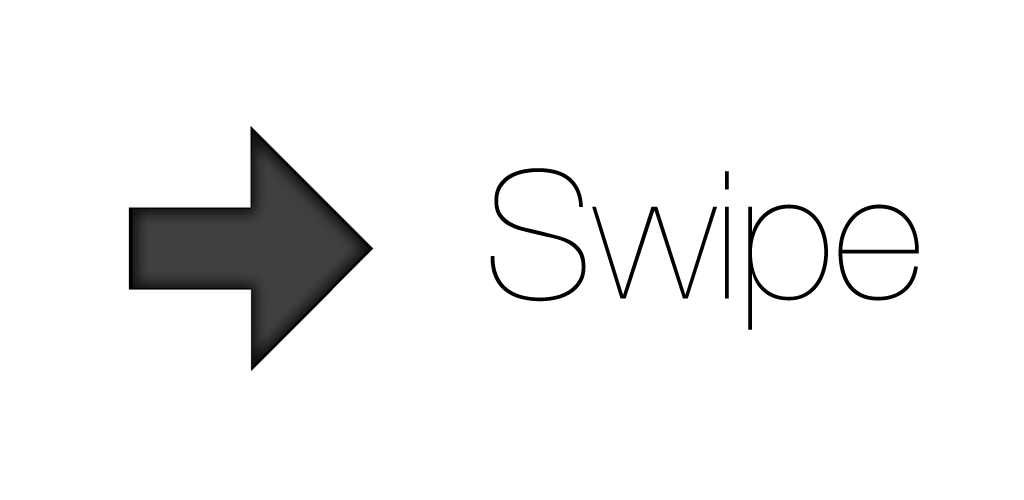
<style>
.page{position:relative;width:1024px;height:500px;background:#ffffff}
.page>*{position:absolute;margin:0}
.t1{font:178px "HelveticaNeue-UltraLight";color:#000000}
</style>
<div class="page">
<p class="t1" style="left:490px;top:168px;width:429px;height:162px">Swipe</p>
</div>
